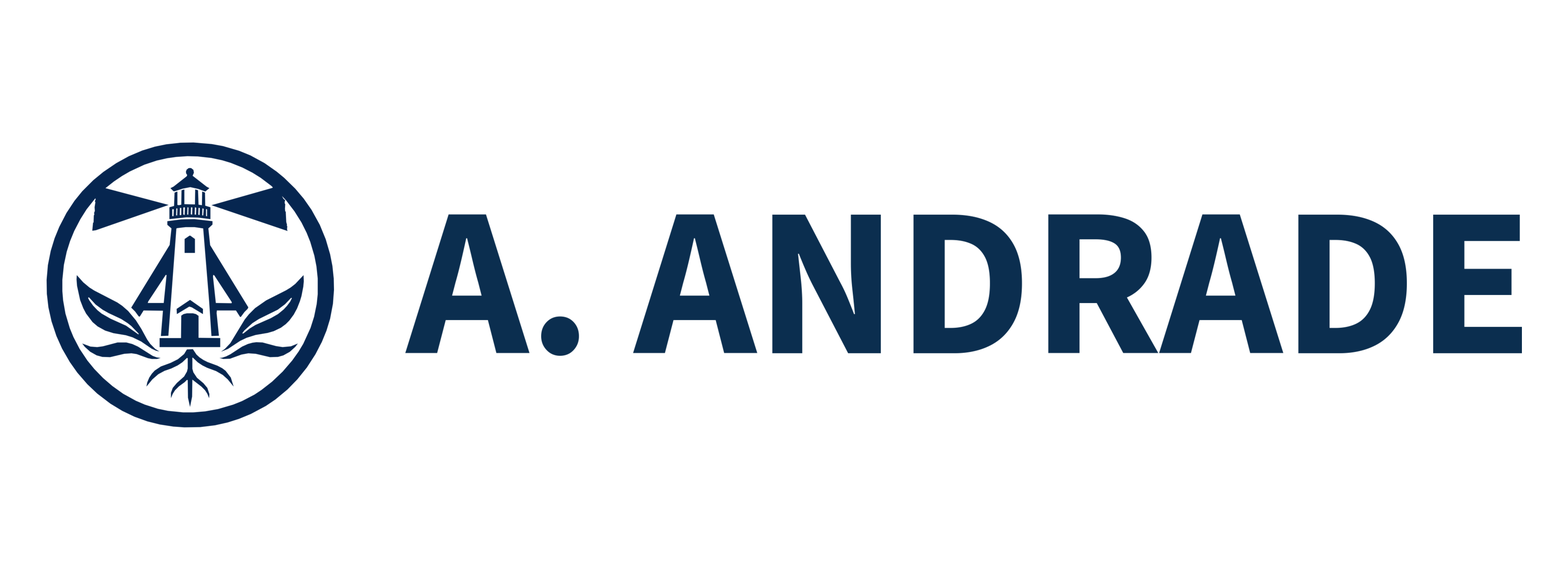
<style>
.page{position:relative;width:1568px;height:570px;background:#ffffff}
.page>*{position:absolute;margin:0}
.t1{font:237.6px "SourceSans3Roman-Semibold";color:#0b2e4f}
</style>
<div class="page">
<p class="t1" style="left:0px;top:0px;width:1568px;height:570px">A. ANDRADE</p>
</div>
